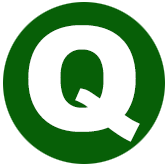
<style>
.page{position:relative;width:168px;height:168px;background:#ffffff}
.page>*{position:absolute;margin:0}
.t1{font:144px "Arial-Black";color:#ffffff}
</style>
<div class="page">
<p class="t1" style="left:28px;top:25px;width:112px;height:117px">Q</p>
</div>
